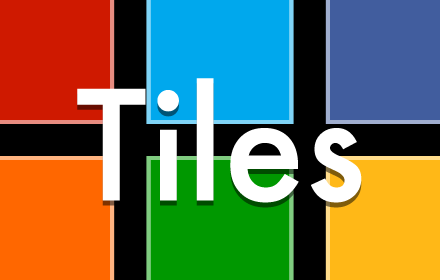
<style>
.page{position:relative;width:440px;height:280px}
.page>*{position:absolute;margin:0}
.t1{font:148px "Futura-Medium";color:#ffffff}
</style>
<div class="page">
<p class="t1" style="left:77px;top:78px;width:285px;height:125px">Tiles</p>
</div>
